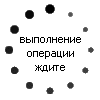
<style>
.page{position:relative;width:100px;height:100px;background:#ffffff}
.page>*{position:absolute;margin:0}
.t1{font:12px "MS Sans Serif";color:#000000}
</style>
<div class="page">
<p class="t1" style="left:20px;top:37px;width:61px;height:35px;text-align:center">выполнение<br>операции<br>ждите</p>
</div>
